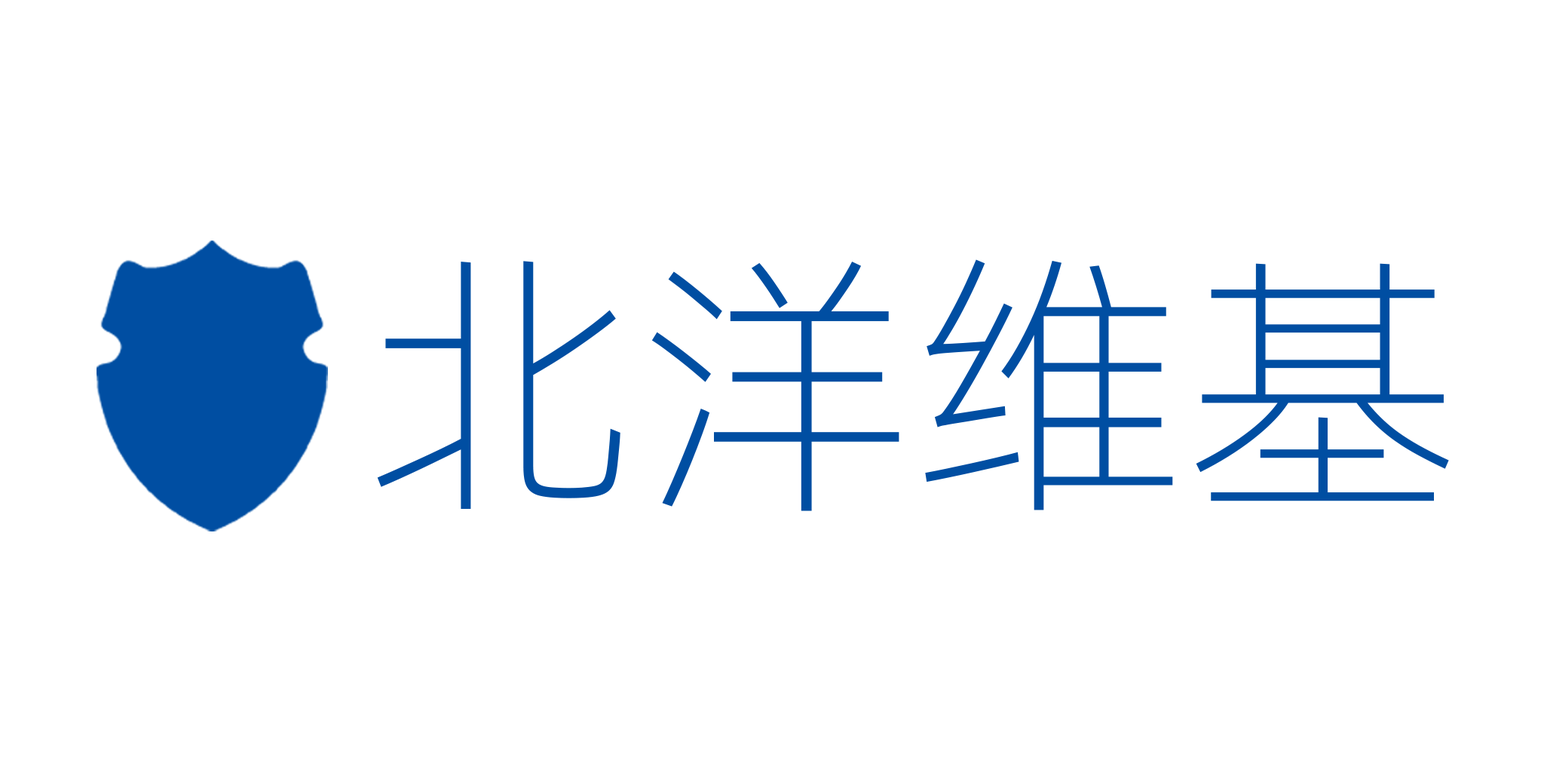
<style>
.page{position:relative;width:1544px;height:772px;background:#ffffff}
.page>*{position:absolute;margin:0}
.t1{font:278.6px "Alibaba-PuHuiTi-L";color:#004ea2}
</style>
<div class="page">
<p class="t1" style="left:377px;top:259px;width:1072px;height:252px">北洋维基</p>
</div>
